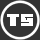
<style>
.page{position:relative;width:40px;height:40px;background:#333333}
.page>*{position:absolute;margin:0}
.t1{font:14px "Minecraft-z2font";color:#ffffff}
</style>
<div class="page">
<p class="t1" style="left:7px;top:14px;width:26px;height:12px">TS</p>
</div>
